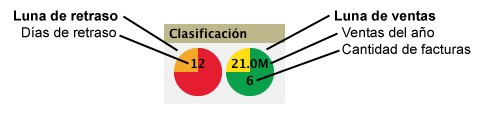
<style>
.page{position:relative;width:500px;height:120px;background:#ffffff}
.page>*{position:absolute;margin:0}
.t1{font:14px "Arial-BoldMT";color:#000000}
.t2{font:14px "ArialMT";color:#000000}
</style>
<div class="page">
<p class="t1" style="left:14px;top:10px;width:104px;height:28px">Luna de retraso<br><span class="t2">  Días de retraso</span></p>
<p class="t2" style="left:335px;top:10px;width:136px;height:45px"><span class="t1">Luna de ventas<br></span>  Ventas del año<br>  Cantidad de facturas</p>
</div>
